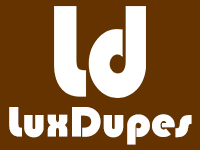
<style>
.page{position:relative;width:200px;height:150px;background:#653300}
.page>*{position:absolute;margin:0}
.t1{font:44.2px "Bauhaus93";color:#fffefe}
</style>
<div class="page">
<p class="t1" style="left:9px;top:107px;width:183px;height:38px">LuxDupes</p>
</div>
